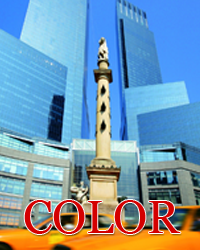
<style>
.page{position:relative;width:200px;height:250px}
.page>*{position:absolute;margin:0}
.t1{font:45.6px "Georgia";color:#d40000}
</style>
<div class="page">
<p class="t1" style="left:24px;top:200px;width:157px;height:34px">COLOR</p>
</div>
